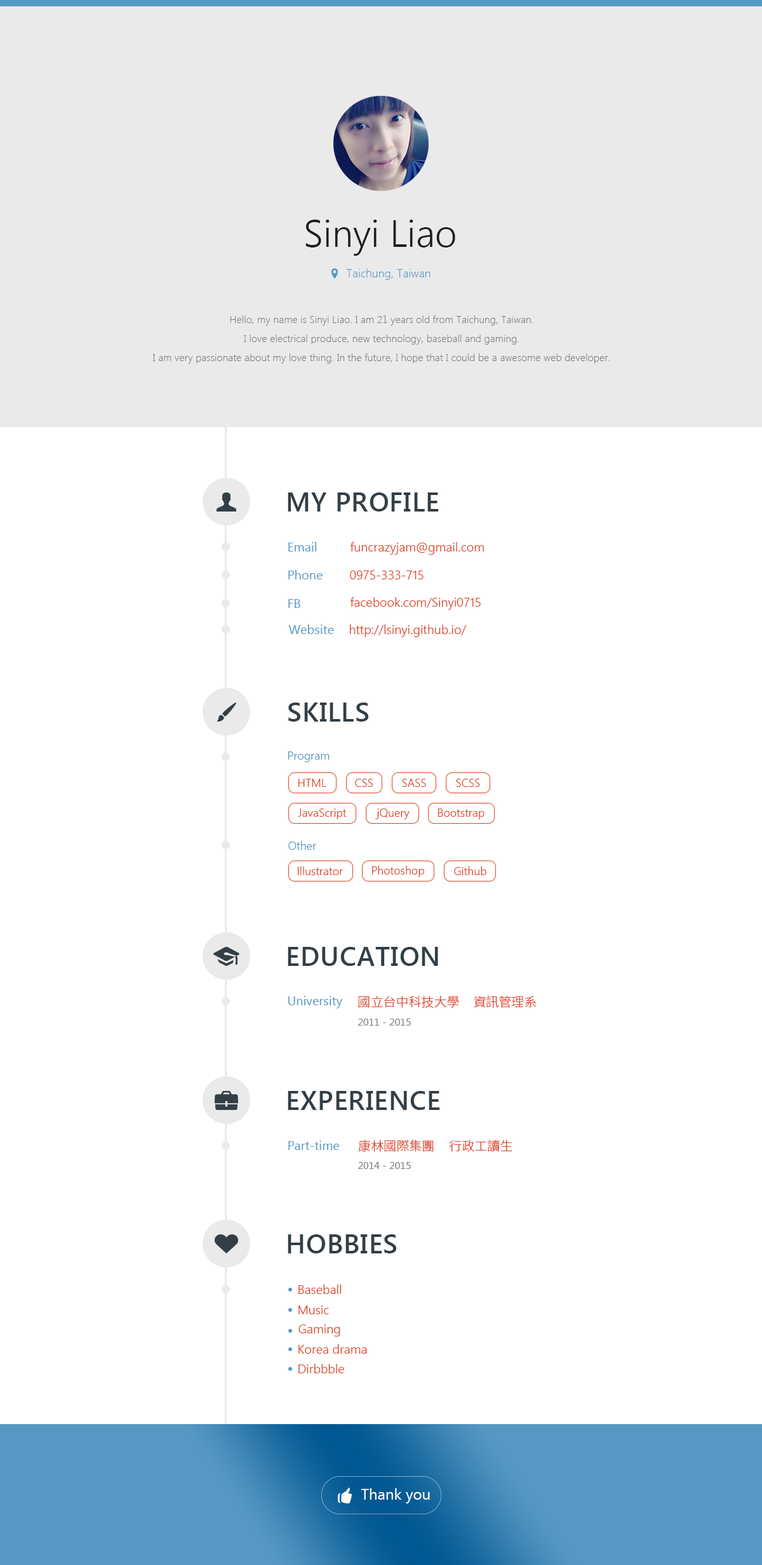
<style>
.page{position:relative;width:762px;height:1565px;background:#ffffff}
.page>*{position:absolute;margin:0}
.t1{font:38.1px "SegoeUI-Semilight";color:#1e1e1e}
.t2{font:11.4px "SegoeUI-Light";letter-spacing:0.01em;color:#5698c4}
.t3{font:10.2px/19px "SegoeUI-Light";letter-spacing:0.01em;color:#7f7e7e}
.t4{font:26.7px "SegoeUI-SemiBold";letter-spacing:0.025em;color:#333f47}
.t5{font:12.7px "SegoeUI";color:#5698c4}
.t6{font:12.7px "SegoeUI-Semilight";color:#da462a}
.t7{font:11.4px "SegoeUI-Semilight";color:#5698c4}
.t8{font:11.4px "SegoeUI-Semilight";color:#da462a}
.t9{font:12.7px "SourceHanSansTWHK-Light";color:#da462a}
.t10{font:10.2px "SegoeUI";color:#7f7e7e}
.t11{font:15.2px "SegoeUI";color:#ffffff}
</style>
<div class="page">
<p class="t1" style="left:305px;top:220px;width:150px;height:36px">Sinyi Liao</p>
<p class="t2" style="left:346px;top:269px;width:84px;height:11px">Taichung, Taiwan</p>
<p class="t3" style="left:152px;top:315px;width:457px;height:49px;text-align:center">Hello, my name is Sinyi Liao. I am 21 years old from Taichung, Taiwan.<br>I love electrical produce, new technology, baseball and gaming.<br>I am very passionate about my love thing. In the future, I hope that I could be a awesome web developer.</p>
<p class="t4" style="left:288px;top:493px;width:151px;height:19px">MY PROFILE</p>
<p class="t5" style="left:288px;top:542px;width:29px;height:10px">Email</p>
<p class="t6" style="left:350px;top:542px;width:134px;height:13px">funcrazyjam@gmail.com</p>
<p class="t5" style="left:288px;top:570px;width:34px;height:10px">Phone</p>
<p class="t6" style="left:350px;top:571px;width:73px;height:9px">0975-333-715</p>
<p class="t5" style="left:288px;top:599px;width:12px;height:9px">FB</p>
<p class="t6" style="left:350px;top:597px;width:131px;height:13px">facebook.com/Sinyi0715</p>
<p class="t5" style="left:288px;top:625px;width:46px;height:9px">Website</p>
<p class="t6" style="left:350px;top:625px;width:117px;height:12px">http://lsinyi.github.io/</p>
<p class="t4" style="left:288px;top:703px;width:81px;height:19px">SKILLS</p>
<p class="t7" style="left:288px;top:752px;width:41px;height:10px">Program</p>
<p class="t8" style="left:298px;top:779px;width:28px;height:8px">HTML</p>
<p class="t8" style="left:355px;top:779px;width:18px;height:8px">CSS</p>
<p class="t8" style="left:402px;top:779px;width:24px;height:8px">SASS</p>
<p class="t8" style="left:456px;top:779px;width:24px;height:8px">SCSS</p>
<p class="t8" style="left:298px;top:809px;width:49px;height:11px">JavaScript</p>
<p class="t8" style="left:375px;top:809px;width:34px;height:11px">jQuery</p>
<p class="t8" style="left:438px;top:809px;width:46px;height:11px">Bootstrap</p>
<p class="t7" style="left:288px;top:841px;width:28px;height:9px">Other</p>
<p class="t8" style="left:298px;top:866px;width:45px;height:9px">Illustrator</p>
<p class="t8" style="left:372px;top:866px;width:52px;height:11px">Photoshop</p>
<p class="t8" style="left:454px;top:866px;width:32px;height:9px">Github</p>
<p class="t4" style="left:288px;top:947px;width:150px;height:19px">EDUCATION</p>
<p class="t5" style="left:288px;top:996px;width:54px;height:13px">University</p>
<p class="t9" style="left:358px;top:996px;width:101px;height:12px">國立台中科技大學</p>
<p class="t9" style="left:474px;top:996px;width:62px;height:12px">資訊管理系</p>
<p class="t10" style="left:358px;top:1019px;width:53px;height:7px">2011 - 2015</p>
<p class="t4" style="left:288px;top:1091px;width:152px;height:19px">EXPERIENCE</p>
<p class="t5" style="left:288px;top:1141px;width:51px;height:9px">Part-time</p>
<p class="t9" style="left:358px;top:1140px;width:76px;height:12px">康林國際集團</p>
<p class="t9" style="left:449px;top:1140px;width:63px;height:12px">行政工讀生</p>
<p class="t10" style="left:358px;top:1162px;width:53px;height:7px">2014 - 2015</p>
<p class="t4" style="left:288px;top:1235px;width:109px;height:19px">HOBBIES</p>
<p class="t6" style="left:298px;top:1285px;width:43px;height:9px">Baseball</p>
<p class="t6" style="left:298px;top:1306px;width:31px;height:9px">Music</p>
<p class="t6" style="left:298px;top:1325px;width:42px;height:12px">Gaming</p>
<p class="t6" style="left:298px;top:1344px;width:69px;height:10px">Korea drama</p>
<p class="t6" style="left:298px;top:1364px;width:46px;height:10px">Dirbbble</p>
<p class="t11" style="left:361px;top:1489px;width:69px;height:15px">Thank you</p>
</div>
